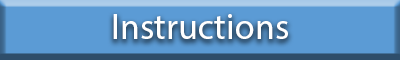
<style>
.page{position:relative;width:400px;height:60px;background:#5b9bd5}
.page>*{position:absolute;margin:0}
.t1{font:36px "MyriadPro-Regular";color:#ffffff}
</style>
<div class="page">
<p class="t1" style="left:113px;top:14px;width:175px;height:25px">Instructions</p>
</div>
